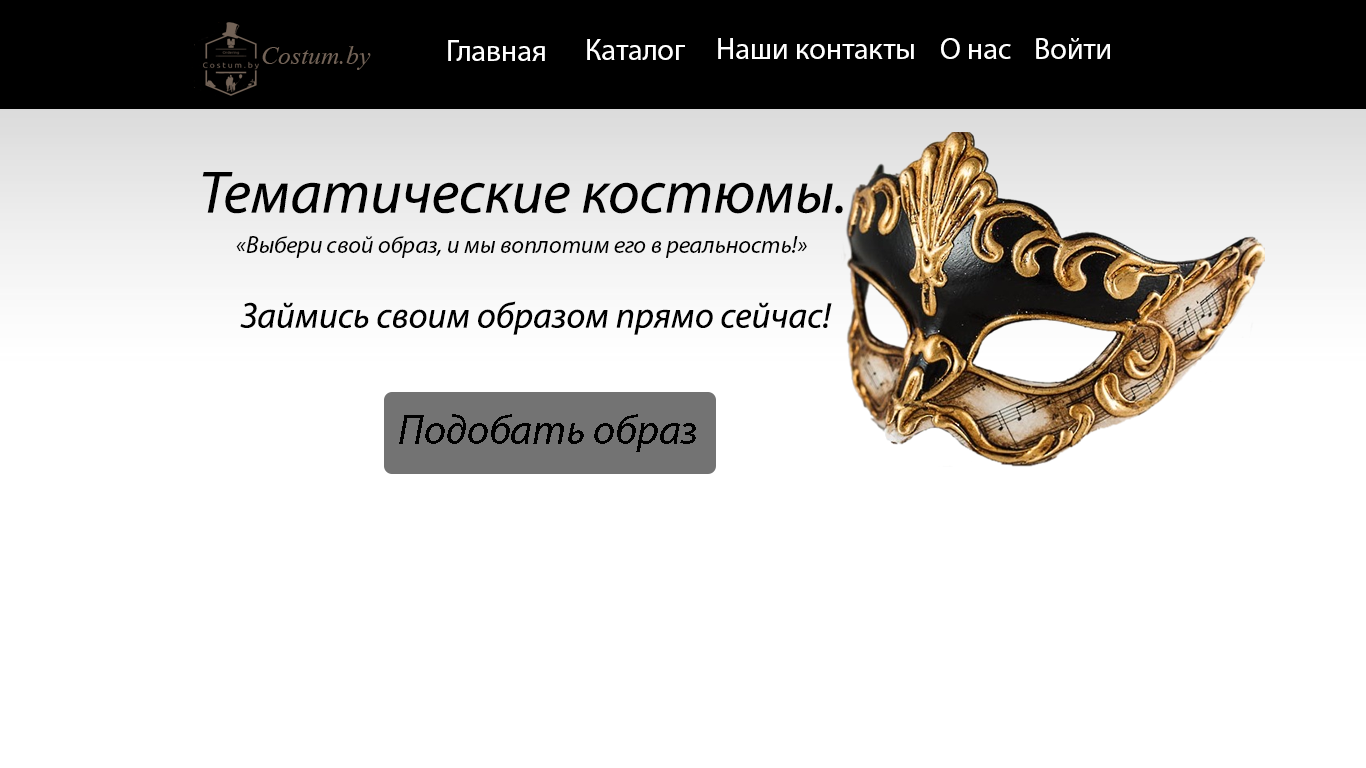
<style>
.page{position:relative;width:1366px;height:768px;background:#ffffff}
.page>*{position:absolute;margin:0}
.t1{font:30px "MyriadPro-Regular";color:#ffffff}
.t2{font:60px "MyriadPro-It";color:#000000}
.t3{font:24px "MyriadPro-It";color:#000000}
.t4{font:36px "MyriadPro-It";color:#000000}
.t5{font:42px "MyriadPro-It";color:#000000}
</style>
<div class="page">
<p class="t1" style="left:448px;top:40px;width:97px;height:21px">Главная</p>
<p class="t1" style="left:587px;top:39px;width:98px;height:21px">Каталог</p>
<p class="t1" style="left:718px;top:38px;width:196px;height:21px">Наши контакты</p>
<p class="t1" style="left:941px;top:38px;width:70px;height:21px">О нас</p>
<p class="t1" style="left:1036px;top:38px;width:74px;height:21px">Войти</p>
<p class="t2" style="left:202px;top:172px;width:641px;height:42px">Тематические костюмы.</p>
<p class="t3" style="left:236px;top:236px;width:571px;height:22px">«Выбери свой образ, и мы воплотим его в реальность!»</p>
<p class="t4" style="left:240px;top:301px;width:592px;height:34px">Займись своим образом прямо сейчас!</p>
<p class="t5" style="left:399px;top:414px;width:297px;height:38px">Подобать образ</p>
</div>
